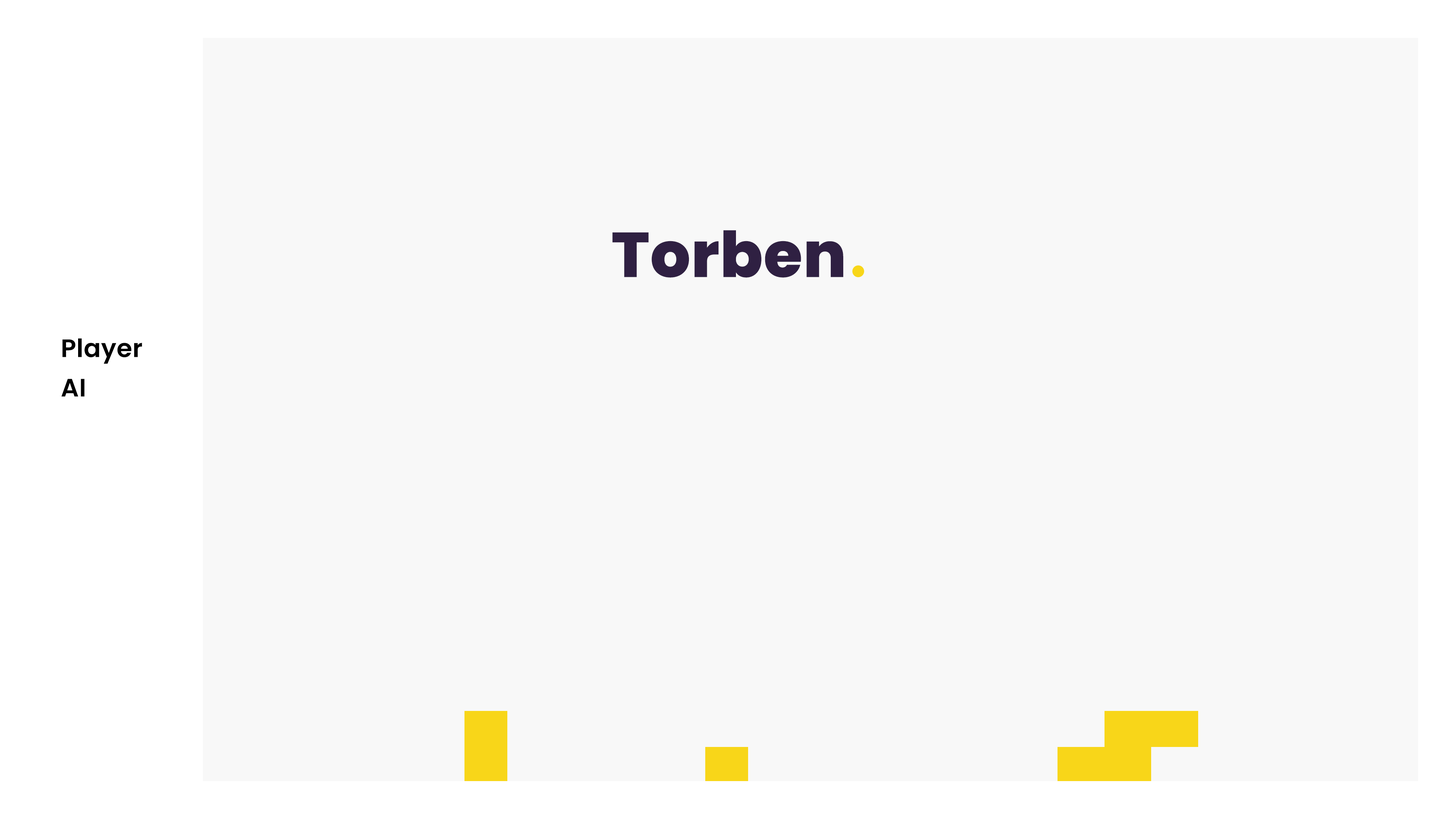
<style>
.page{position:relative;width:1456px;height:819px;background:#f8f8f8}
.page>*{position:absolute;margin:0}
.t1{font:63.2px "Poppins-ExtraBold";letter-spacing:0.01em;color:#2f2042}
.t2{font:25.3px/39.5px "Poppins-SemiBold";letter-spacing:0.01em;color:#000000}
</style>
<div class="page">
<p class="t1" style="left:612px;top:230px;width:231px;height:48px">Torben</p>
<p class="t2" style="left:61px;top:338px;width:81px;height:59px">Player<br>AI</p>
</div>
